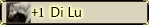
<style>
.page{position:relative;width:149px;height:25px;background:#d9d5bd}
.page>*{position:absolute;margin:0}
.t1{font:14px "LaoUI";color:#000000}
</style>
<div class="page">
<p class="t1" style="left:51px;top:7px;width:30px;height:10px">Di Lu</p>
</div>
